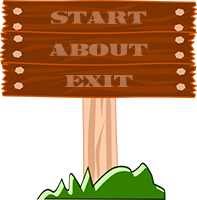
<style>
.page{position:relative;width:197px;height:200px;background:#ffffff}
.page>*{position:absolute;margin:0}
.t1{font:20.7px "LegalTender";color:#b1734e}
</style>
<div class="page">
<p class="t1" style="left:51px;top:11px;width:96px;height:13px">START</p>
<p class="t1" style="left:49px;top:43px;width:99px;height:13px">ABOUT</p>
<p class="t1" style="left:64px;top:75px;width:69px;height:12px">EXIT</p>
</div>
